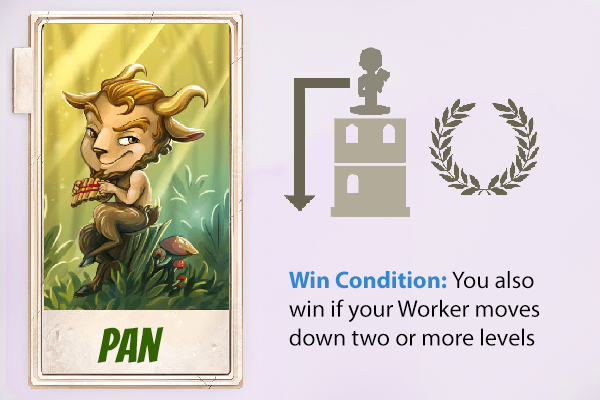
<style>
.page{position:relative;width:600px;height:400px}
.page>*{position:absolute;margin:0}
.t1{font:24px "MyriadPro-Regular";color:#000000}
.t2{font:24px "MyriadPro-Bold";color:#3188d1}
.t3{font:48px "Bangers-Regular";color:#336300}
</style>
<div class="page">
<p class="t1" style="left:289px;top:271px;width:251px;height:75px"><span class="t2">Win Condition: </span>You also win if your Worker moves down two or more levels</p>
<p class="t3" style="left:97px;top:327px;width:67px;height:37px">pan</p>
</div>
